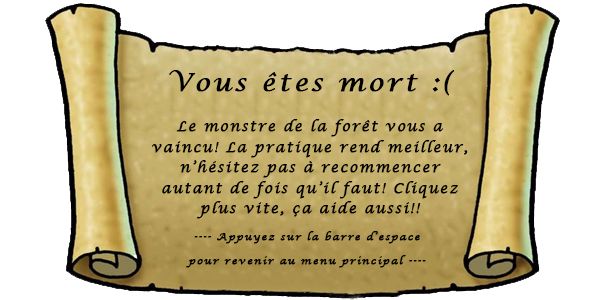
<style>
.page{position:relative;width:600px;height:300px;background:#ffffff}
.page>*{position:absolute;margin:0}
.t1{font:13.7px/20.5px "LucidaCalligraphy-Italic";letter-spacing:0.1em;color:#000000;font-weight:bold}
.t2{font:25.5px/20.5px "LucidaCalligraphy-Italic";letter-spacing:0.1em;color:#000000;font-weight:bold}
.t3{font:10.1px/23.4px "LucidaCalligraphy-Italic";letter-spacing:0.1em;color:#000000;font-weight:bold}
</style>
<div class="page">
<p class="t1" style="left:151px;top:70px;width:317px;height:149px;text-align:center"><span class="t2">Vous êtes mort :(<br></span><br>Le monstre de la forêt vous a vaincu! La pratique rend meilleur, n’hésitez pas à recommencer autant de fois qu’il faut! Cliquez plus vite, ça aide aussi!!</p>
<p class="t3" style="left:186px;top:231px;width:240px;height:37px;text-align:center">---- Appuyez sur la barre d’espace                     pour revenir au menu principal ----<br><br>    <br><br><br><br><br>-</p>
</div>
